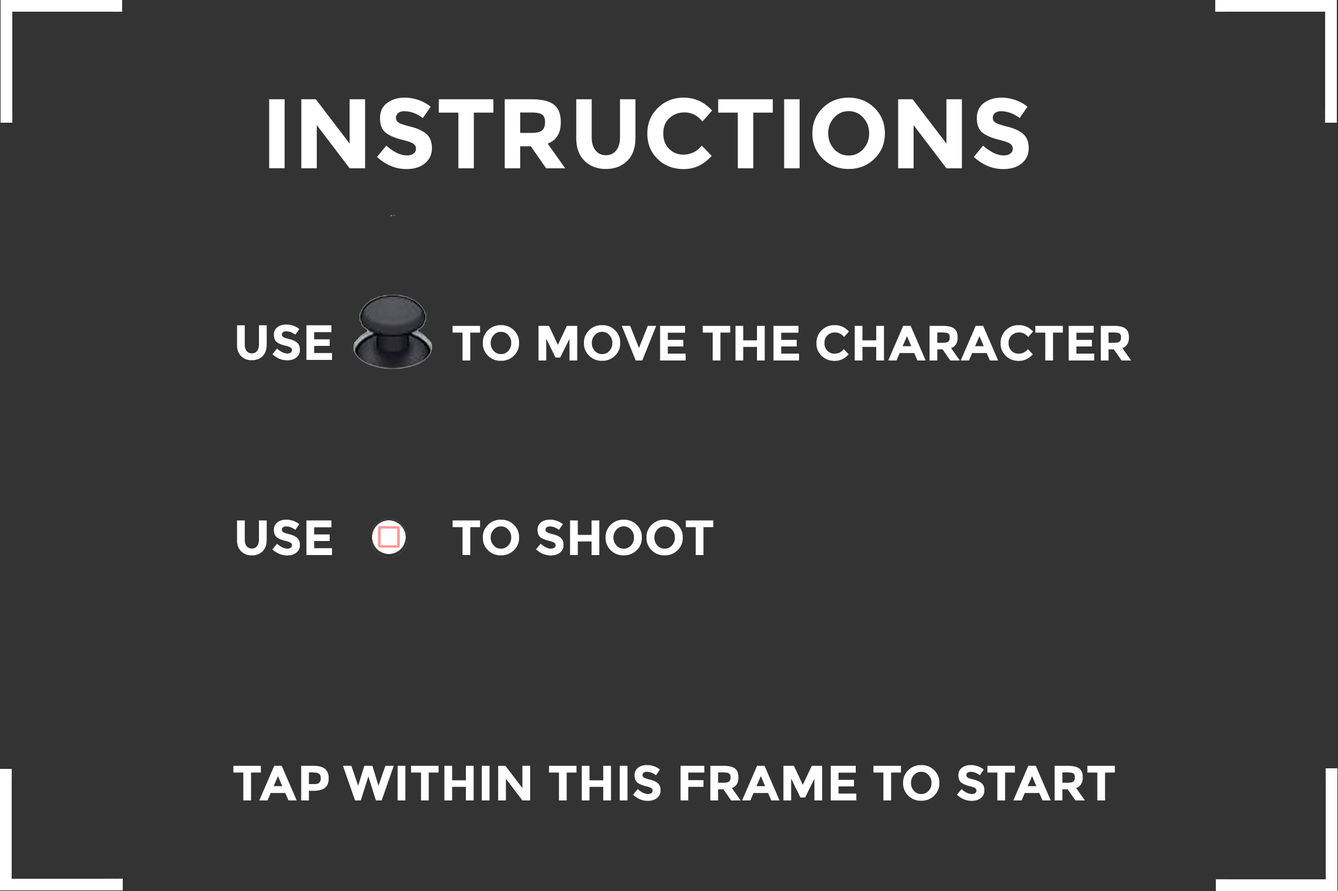
<style>
.page{position:relative;width:1338px;height:891px;background:#333333}
.page>*{position:absolute;margin:0}
.t1{font:99px "Montserrat-Bold";color:#ffffff}
.t2{font:49.5px "Montserrat-Bold";color:#ffffff}
</style>
<div class="page">
<p class="t1" style="left:269px;top:98px;width:760px;height:71px">INSTRUCTIONS</p>
<p class="t2" style="left:237px;top:324px;width:95px;height:37px">USE</p>
<p class="t2" style="left:452px;top:325px;width:679px;height:36px">TO MOVE THE CHARACTER</p>
<p class="t2" style="left:237px;top:520px;width:95px;height:36px">USE</p>
<p class="t2" style="left:452px;top:520px;width:262px;height:36px">TO SHOOT</p>
<p class="t2" style="left:233px;top:765px;width:882px;height:36px">TAP WITHIN THIS FRAME TO START</p>
</div>
